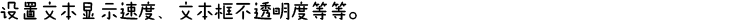
<style>
.page{position:relative;width:732px;height:21px;background:#ffffff}
.page>*{position:absolute;margin:0}
.t1{font:22px "¢è?";color:#000000}
</style>
<div class="page">
<p class="t1" style="left:0px;top:1px;width:357px;height:19px">设置文本显示速度、文本框不透明度等等。</p>
</div>
